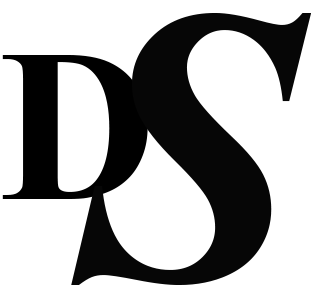
<style>
.page{position:relative;width:311px;height:291px;background:#ffffff}
.page>*{position:absolute;margin:0}
.t1{font:393.1px "TimesNewRomanPS-BoldItalicMT";color:#060606}
.t2{font:216.6px "TimesNewRomanPS-BoldMT";color:#000000}
</style>
<div class="page">
<p class="t1" style="left:71px;top:13px;width:241px;height:272px">S</p>
<p class="t2" style="left:2px;top:55px;width:146px;height:144px">D</p>
</div>
